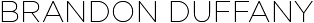
<style>
.page{position:relative;width:314px;height:23px;background:#ffffff}
.page>*{position:absolute;margin:0}
.t1{font:29px "GothamHTF-Thin";letter-spacing:0.02em;color:#000000}
</style>
<div class="page">
<p class="t1" style="left:1px;top:1px;width:312px;height:21px">BRANDON DUFFANY</p>
</div>
